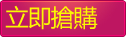
<style>
.page{position:relative;width:126px;height:37px;background:#be1661}
.page>*{position:absolute;margin:0}
.t1{font:24px "MicrosoftYaHei";letter-spacing:-0.05em;color:#faf702}
</style>
<div class="page">
<p class="t1" style="left:5px;top:5px;width:93px;height:25px">立即搶購</p>
</div>
